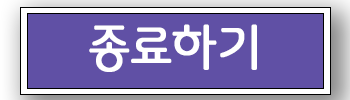
<style>
.page{position:relative;width:350px;height:100px;background:#6050a5}
.page>*{position:absolute;margin:0}
.t1{font:50px "HancomMalangMalang-Regular";letter-spacing:-0.01em;color:#ffffff;font-weight:bold}
</style>
<div class="page">
<p class="t1" style="left:89px;top:24px;width:168px;height:48px">종료하기</p>
</div>
